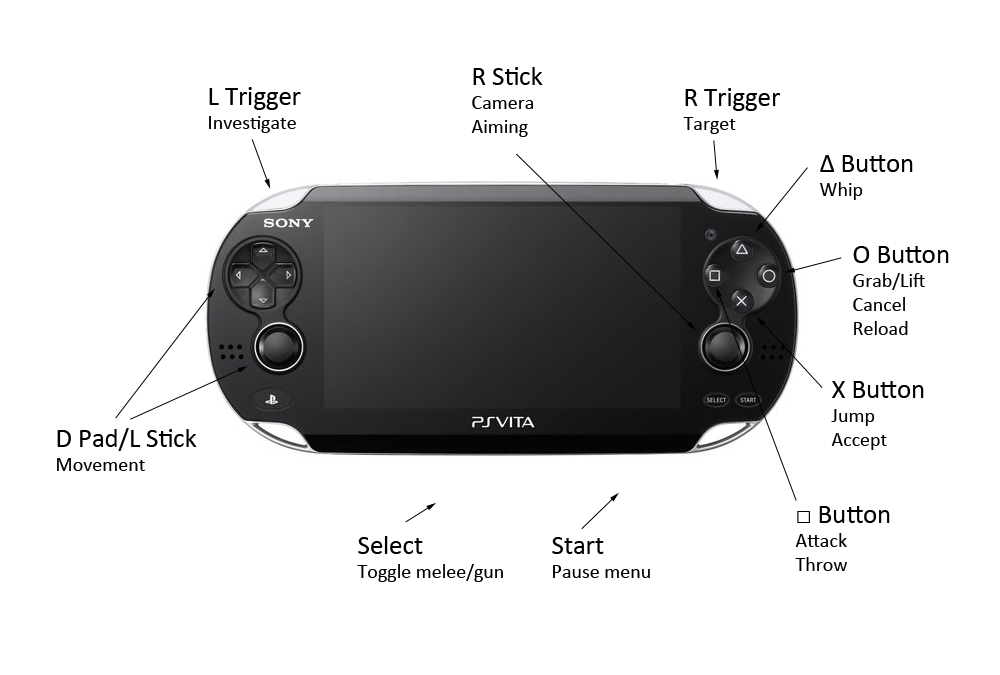
<style>
.page{position:relative;width:1000px;height:675px;background:#ffffff}
.page>*{position:absolute;margin:0}
.t1{font:20px "Calibri";color:#000000}
.t2{font:26.7px "Calibri";color:#000000}
</style>
<div class="page">
<p class="t1" style="left:471px;top:67px;width:72px;height:70px"><span class="t2">R Stick<br></span>Camera<br>Aiming</p>
<p class="t1" style="left:209px;top:87px;width:92px;height:46px"><span class="t2">L Trigger<br></span>Investigate</p>
<p class="t2" style="left:683px;top:88px;width:98px;height:46px">R Trigger<br><span class="t1">Target</span></p>
<p class="t2" style="left:820px;top:155px;width:93px;height:45px">∆ Button<br><span class="t1">Whip</span></p>
<p class="t1" style="left:853px;top:246px;width:96px;height:89px"><span class="t2">O Button<br></span>Grab/Lift<br>Cancel<br>Reload</p>
<p class="t1" style="left:831px;top:381px;width:93px;height:69px"><span class="t2">X Button<br></span>Jump<br>Accept</p>
<p class="t2" style="left:57px;top:428px;width:140px;height:43px">D Pad/L Stick<br><span class="t1">Movement</span></p>
<p class="t1" style="left:795px;top:506px;width:95px;height:65px"><span class="t2">□ Button<br></span>Attack<br>Throw</p>
<p class="t1" style="left:357px;top:536px;width:146px;height:46px"><span class="t2">Select<br></span>Toggle melee/gun</p>
<p class="t1" style="left:552px;top:537px;width:98px;height:41px"><span class="t2">Start<br></span>Pause menu</p>
</div>
